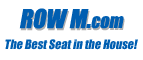
<style>
.page{position:relative;width:143px;height:60px;background:#ffffff}
.page>*{position:absolute;margin:0}
.t1{font:24px "Impact";color:#005eb1;font-style:italic}
.t2{font:18px "Impact";color:#005eb1;font-style:italic}
.t3{font:24px "Impact";font-style:italic}
.t4{font:18px "Impact";font-style:italic}
.t5{font:12px "Impact";color:#005eb1;font-style:italic}
</style>
<div class="page">
<p class="t1" style="left:19px;top:8px;width:105px;height:21px">ROW M.<span class="t2">com</span></p>
<p class="t3" style="left:20px;top:10px;width:105px;height:21px">ROW M.<span class="t4">com</span></p>
<p class="t5" style="left:5px;top:39px;width:133px;height:11px">The Best Seat in the House!</p>
</div>
